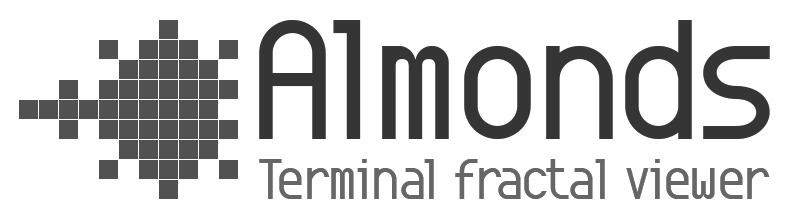
<style>
.page{position:relative;width:790px;height:220px;background:#ffffff}
.page>*{position:absolute;margin:0}
.t1{font:172px "EnvyCodeR";letter-spacing:-0.18em;color:#353535}
.t2{font:172px "EnvyCodeR";letter-spacing:-0.06em;color:#353535}
.t3{font:172px "EnvyCodeR";letter-spacing:-0.08em;color:#353535}
.t4{font:172px "EnvyCodeR";color:#353535}
.t5{font:57px "EnvyCodeR";letter-spacing:-0.16em;color:#666666}
.t6{font:57px "EnvyCodeR";letter-spacing:-0.18em;color:#666666}
.t7{font:57px "EnvyCodeR";letter-spacing:-0.06em;color:#666666}
.t8{font:57px "EnvyCodeR";letter-spacing:-0.1em;color:#666666}
.t9{font:57px "EnvyCodeR";letter-spacing:-0.08em;color:#666666}
.t10{font:57px "EnvyCodeR";letter-spacing:-0.2em;color:#666666}
.t11{font:57px "EnvyCodeR";color:#666666}
.t12{font:57px "EnvyCodeR";letter-spacing:-0.12em;color:#666666}
.t13{font:57px "EnvyCodeR";letter-spacing:-0.14em;color:#666666}
</style>
<div class="page">
<p class="t1" style="left:259px;top:20px;width:511px;height:119px">Al<span class="t2">mo</span><span class="t3">nd</span><span class="t4">s</span></p>
<p class="t5" style="left:259px;top:159px;width:511px;height:40px"><span class="t6">T</span><span class="t7">e</span><span class="t8">r</span>mi<span class="t9">n</span><span class="t10">a</span><span class="t11">l </span><span class="t12">f</span><span class="t10">r</span><span class="t9">a</span><span class="t13">c</span><span class="t12">t</span><span class="t6">a</span><span class="t11">l </span><span class="t6">vi</span><span class="t9">e</span><span class="t7">we</span><span class="t11">r</span></p>
</div>
